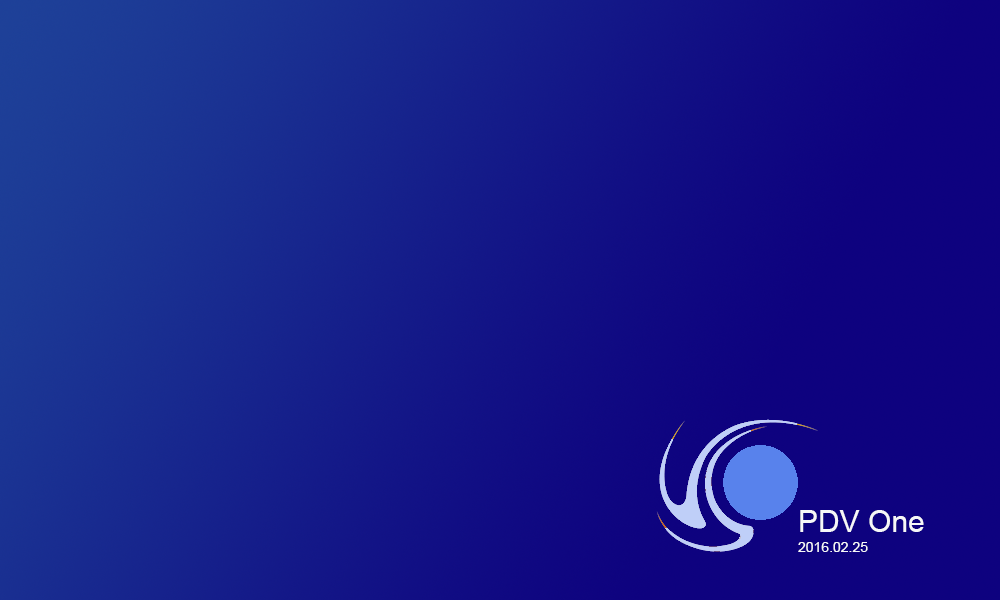
<style>
.page{position:relative;width:1000px;height:600px}
.page>*{position:absolute;margin:0}
.t1{font:30px "ArialMT";color:#f6f7f8}
.t2{font:14px "ArialMT";color:#f6f7f8}
</style>
<div class="page">
<p class="t1" style="left:800px;top:510px;width:124px;height:22px">PDV One</p>
<p class="t2" style="left:798px;top:542px;width:70px;height:10px">2016.02.25</p>
</div>
